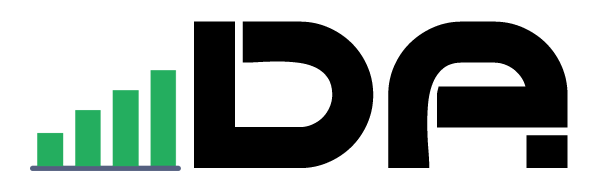
<style>
.page{position:relative;width:599px;height:188px;background:#ffffff}
.page>*{position:absolute;margin:0}
.t1{font:219px "Forvertz-Regular";color:#000000}
</style>
<div class="page">
<p class="t1" style="left:194px;top:21px;width:374px;height:147px">DA</p>
</div>
